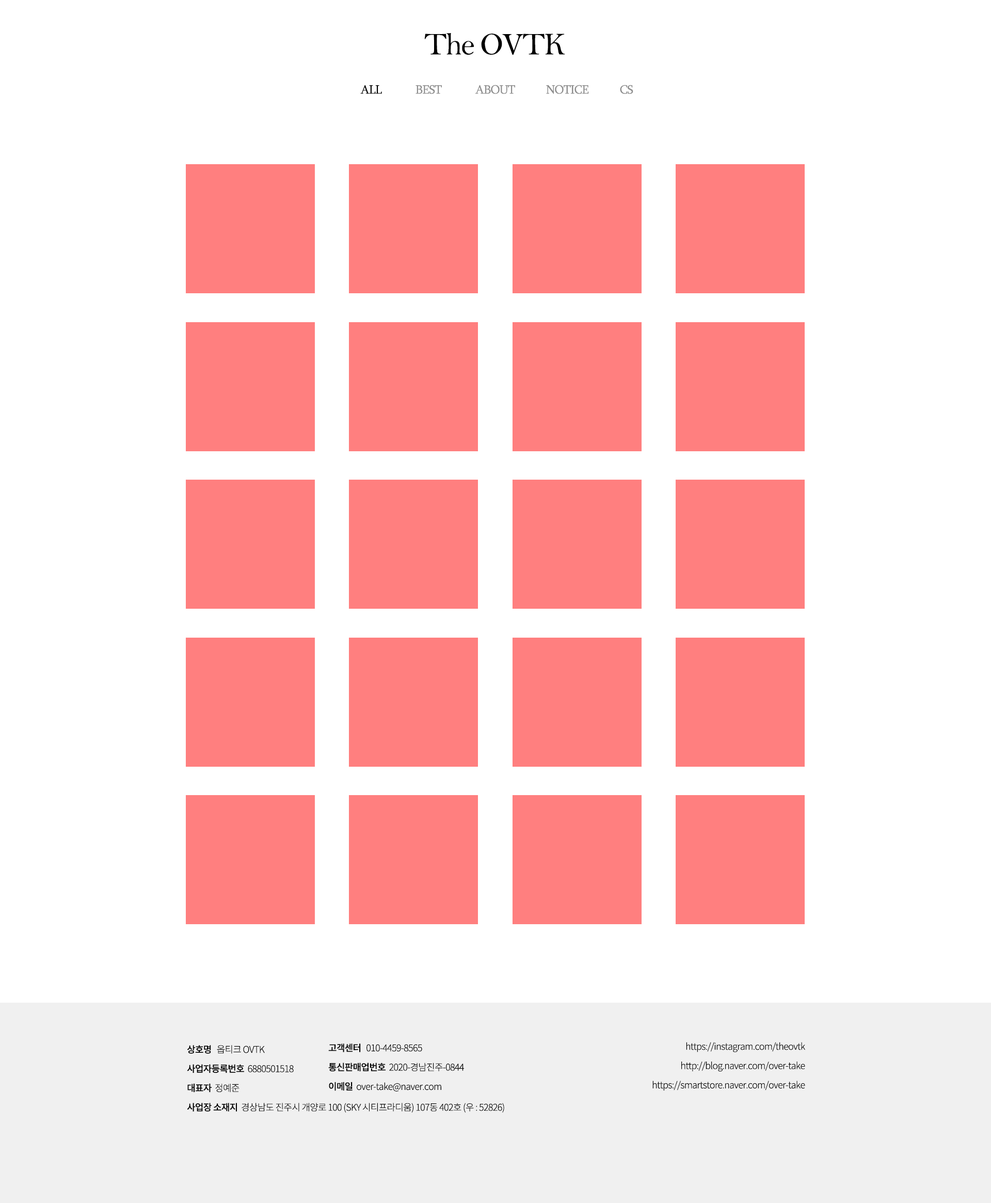
<style>
.page{position:relative;width:991px;height:1203px;background:#ffffff}
.page>*{position:absolute;margin:0}
.t1{font:31.9px "BellMT";letter-spacing:-0.04em;color:#000000}
.t2{font:12.4px "Sylfaen";letter-spacing:-0.04em;color:#8e8e8e}
.t3{font:12.4px "Sylfaen";letter-spacing:-0.04em;color:#000000}
.t4{font:9.3px/19.3px "NotoSansKR-Light";letter-spacing:-0.04em;color:#000000}
.t5{font:9.3px/19.3px "NotoSansKR-Medium";letter-spacing:-0.04em;color:#000000}
</style>
<div class="page">
<p class="t1" style="left:424px;top:33px;width:141px;height:22px">The OVTK</p>
<p class="t2" style="left:360px;top:85px;width:273px;height:9px"><span class="t3">ALL</span>             BEST             ABOUT            NOTICE            CS</p>
<p class="t4" style="left:187px;top:1045px;width:317px;height:68px"><span class="t5">상호명   </span>옵티크 OVTK<br><span class="t5">사업자등록번호  </span>6880501518<br><span class="t5">대표자 </span> 정예준<br><span class="t5">사업장 소재지</span>  경상남도 진주시 개양로 100 (SKY 시티프라디움) 107동 402호 (우 : 52826)</p>
<p class="t4" style="left:328px;top:1043px;width:136px;height:48px"><span class="t5">고객센터</span>   010-4459-8565<br><span class="t5">통신판매업번호 </span> 2020-경남진주-0844<br><span class="t5">이메일 </span> over-take@naver.com</p>
<p class="t4" style="left:653px;top:1042px;width:152px;height:49px;text-align:right">https://instagram.com/theovtk<br>http://blog.naver.com/over-take<br>https://smartstore.naver.com/over-take</p>
</div>
